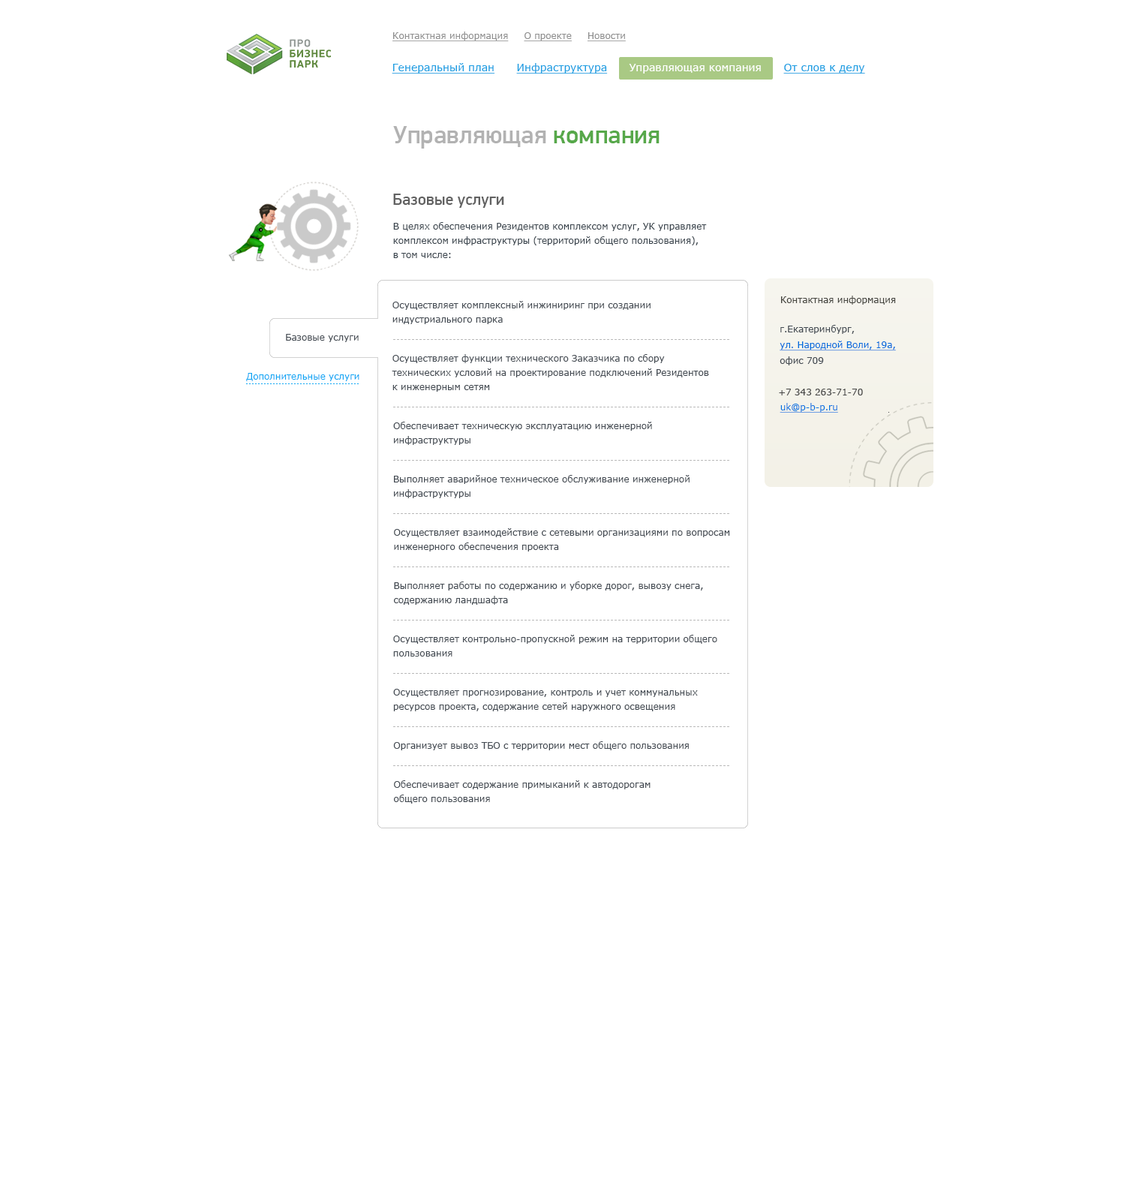
<style>
.page{position:relative;width:1136px;height:1178px;background:#ffffff}
.page>*{position:absolute;margin:0}
.t1{font:9px "Verdana";color:#8f8f8f;text-decoration:underline}
.t2{font:10.5px "Verdana";color:#1ea0e3;text-decoration:underline}
.t3{font:10.5px "Verdana";color:#1ea0e3}
.t4{font:10.5px "Verdana";color:#ffffff}
.t5{font:25.5px "PFDinDisplayPro-Medium";color:#b2b2b2}
.t6{font:25.5px "PFDinDisplayPro-Medium";color:#57a84a}
.t7{font:16.5px "PFDinDisplayPro-Medium";color:#626262}
.t8{font:9px/14.2px "Verdana";color:#3b454e}
.t9{font:9px/14.2px "Verdana";color:#434a52}
.t10{font:9px "Verdana";color:#44443e}
.t11{font:9px/15.7px "Verdana";color:#006ddd;text-decoration:underline}
.t12{font:9px/15.7px "Verdana";color:#5f5f5f}
.t13{font:9px/15.7px "Verdana";color:#434a52}
.t14{font:9px "Verdana";color:#434a52}
.t15{font:9px "Verdana";color:#0ea6f4}
.t16{font:9px "Verdana";color:#444444}
.t17{font:9px "Verdana";color:#0074e1;text-decoration:underline}
</style>
<div class="page">
<p class="t1" style="left:392px;top:32px;width:234px;height:9px">Контактная информация     О проекте     Новости</p>
<p class="t2" style="left:392px;top:63px;width:473px;height:11px"><span class="t3">      </span>Генеральный план      Инфраструктура      <span class="t4">Управляющая компания      </span>От слов к делу</p>
<p class="t5" style="left:393px;top:126px;width:266px;height:22px">Управляющая<span class="t6"> компания</span></p>
<p class="t7" style="left:393px;top:194px;width:111px;height:14px">Базовые услуги</p>
<p class="t8" style="left:393px;top:222px;width:313px;height:36px">В целях обеспечения Резидентов комплексом услуг, УК управляет <br>комплексом инфраструктуры (территорий общего пользования), <br>в том числе:</p>
<p class="t9" style="left:392px;top:301px;width:258px;height:23px">Осуществляет комплексный инжиниринг при создании <br>индустриального парка</p>
<p class="t10" style="left:781px;top:296px;width:115px;height:8px">Контактная информация</p>
<p class="t11" style="left:779px;top:325px;width:117px;height:40px"><span class="t12"><br></span><span class="t13">г.Екатеринбург,<br></span>ул. Народной Воли, 19а, <br><span class="t13">офис 709</span></p>
<p class="t14" style="left:286px;top:334px;width:72px;height:8px">Базовые услуги</p>
<p class="t9" style="left:392px;top:354px;width:317px;height:38px">Осуществляет функции технического Заказчика по сбору <br>технических условий на проектирование подключений Резидентов <br>к инженерным сетям</p>
<p class="t15" style="left:246px;top:373px;width:113px;height:8px">Дополнительные услуги</p>
<p class="t16" style="left:778px;top:388px;width:84px;height:7px">+7 343 263-71-70</p>
<p class="t17" style="left:779px;top:403px;width:59px;height:9px">uk@p-b-p.ru</p>
<p class="t9" style="left:393px;top:422px;width:259px;height:23px">Обеспечивает техническую эксплуатацию инженерной <br>инфраструктуры</p>
<p class="t9" style="left:394px;top:475px;width:295px;height:23px">Выполняет аварийное техническое обслуживание инженерной <br>инфраструктуры</p>
<p class="t9" style="left:394px;top:528px;width:336px;height:23px">Осуществляет взаимодействие с сетевыми организациями по вопросам <br>инженерного обеспечения проекта</p>
<p class="t9" style="left:394px;top:581px;width:309px;height:23px">Выполняет работы по содержанию и уборке дорог, вывозу снега, <br>содержанию ландшафта</p>
<p class="t9" style="left:393px;top:634px;width:324px;height:22px">Осуществляет контрольно-пропускной режим на территории общего <br>пользования</p>
<p class="t9" style="left:393px;top:688px;width:305px;height:23px">Осуществляет прогнозирование, контроль и учет коммунальных <br>ресурсов проекта, содержание сетей наружного освещения</p>
<p class="t14" style="left:393px;top:741px;width:295px;height:9px">Организует вывоз ТБО с территории мест общего пользования</p>
<p class="t9" style="left:394px;top:780px;width:256px;height:23px">Обеспечивает содержание примыканий к автодорогам <br>общего пользования</p>
</div>
